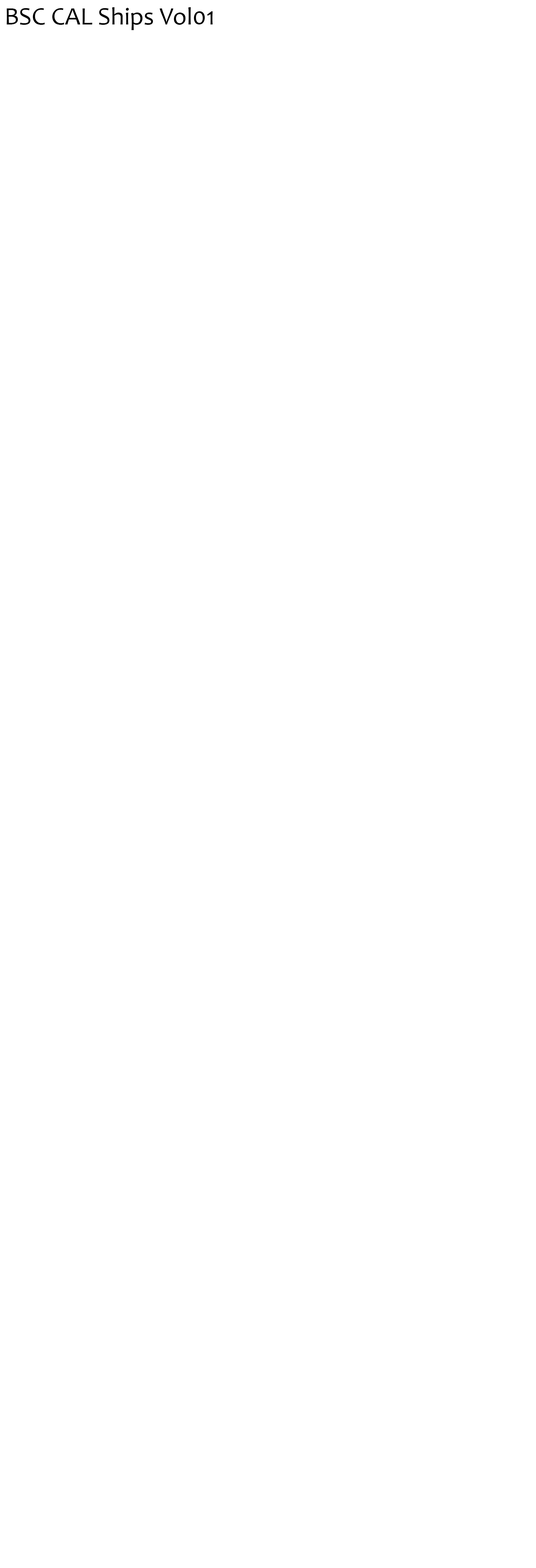
<style>
.page{position:relative;width:536px;height:1568px;background:#ffffff}
.page>*{position:absolute;margin:0}
.t1{font:25.1px "Candara";color:#000000}
</style>
<div class="page">
<p class="t1" style="left:7px;top:7px;width:206px;height:23px">BSC CAL Ships Vol01</p>
</div>
